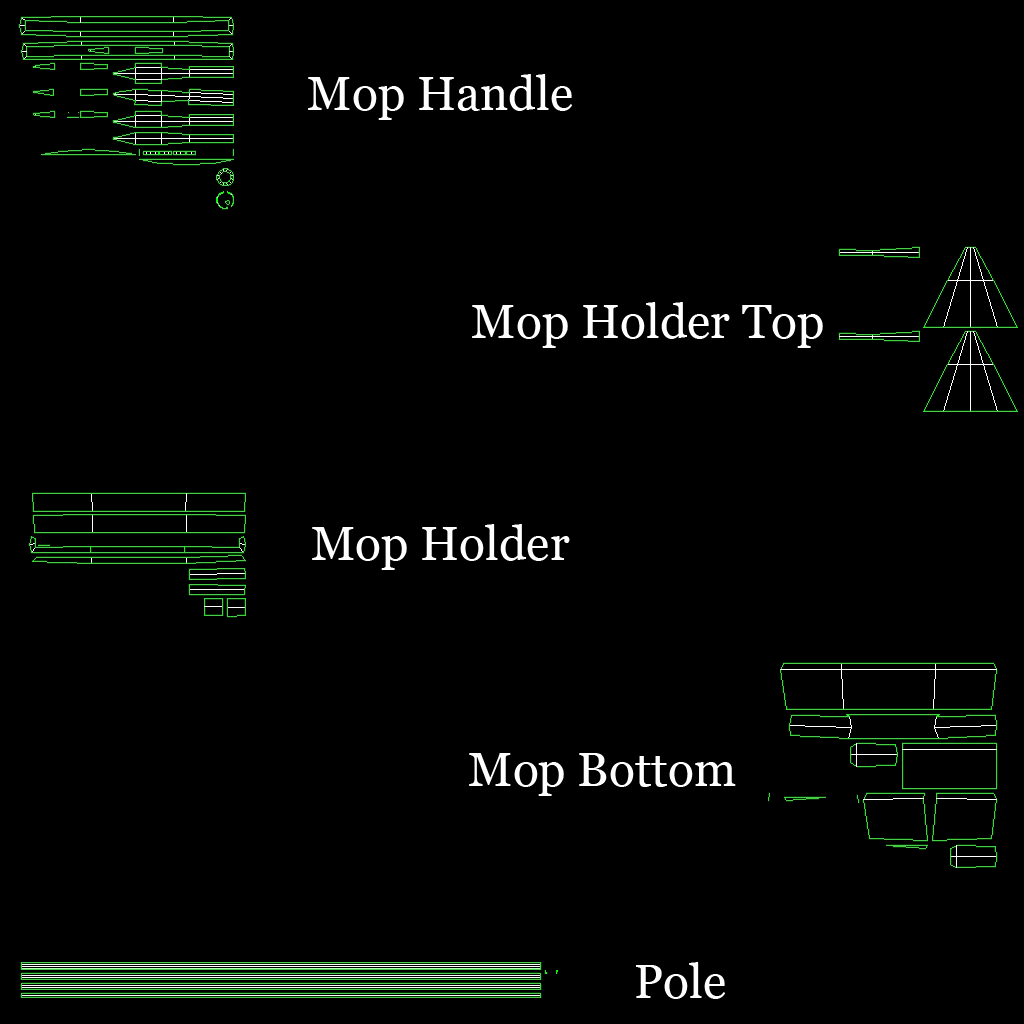
<style>
.page{position:relative;width:1024px;height:1024px;background:#000000}
.page>*{position:absolute;margin:0}
.t1{font:48px "Georgia";color:#ffffff}
</style>
<div class="page">
<p class="t1" style="left:308px;top:74px;width:265px;height:46px">Mop Handle</p>
<p class="t1" style="left:472px;top:302px;width:351px;height:46px">Mop Holder Top</p>
<p class="t1" style="left:312px;top:524px;width:258px;height:46px">Mop Holder</p>
<p class="t1" style="left:469px;top:753px;width:267px;height:43px">Mop Bottom</p>
<p class="t1" style="left:636px;top:962px;width:90px;height:37px">Pole</p>
</div>
